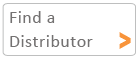
<style>
.page{position:relative;width:140px;height:60px;background:#ffffff}
.page>*{position:absolute;margin:0}
.t1{font:18px/24px "Calibri";letter-spacing:0.025em;color:#737171}
.t2{font:29px "Arial-Black";letter-spacing:0.01em;color:#f8943b;scale:0.69 1}
</style>
<div class="page">
<p class="t1" style="left:10px;top:11px;width:83px;height:36px">Find a <br>Distributor</p>
<p class="t2" style="left:119px;top:32px;width:12px;height:17px">&gt;</p>
</div>
